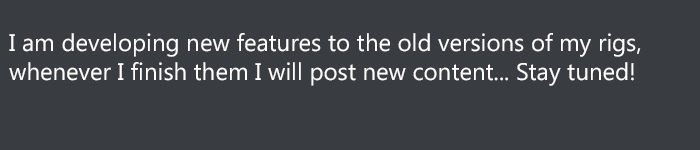
<style>
.page{position:relative;width:700px;height:150px;background:#393c40}
.page>*{position:absolute;margin:0}
.t1{font:24px "MicrosoftPhagsPa";color:#ffffff}
</style>
<div class="page">
<p class="t1" style="left:9px;top:33px;width:632px;height:53px">I am developing new features to the old versions of my rigs, whenever I finish them I will post new content... Stay tuned!</p>
</div>
